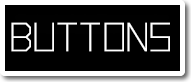
<style>
.page{position:relative;width:191px;height:82px;background:#000000}
.page>*{position:absolute;margin:0}
.t1{font:38px "Hyperspace-Bold";color:#ffffff}
</style>
<div class="page">
<p class="t1" style="left:11px;top:22px;width:159px;height:30px">buttons</p>
</div>
